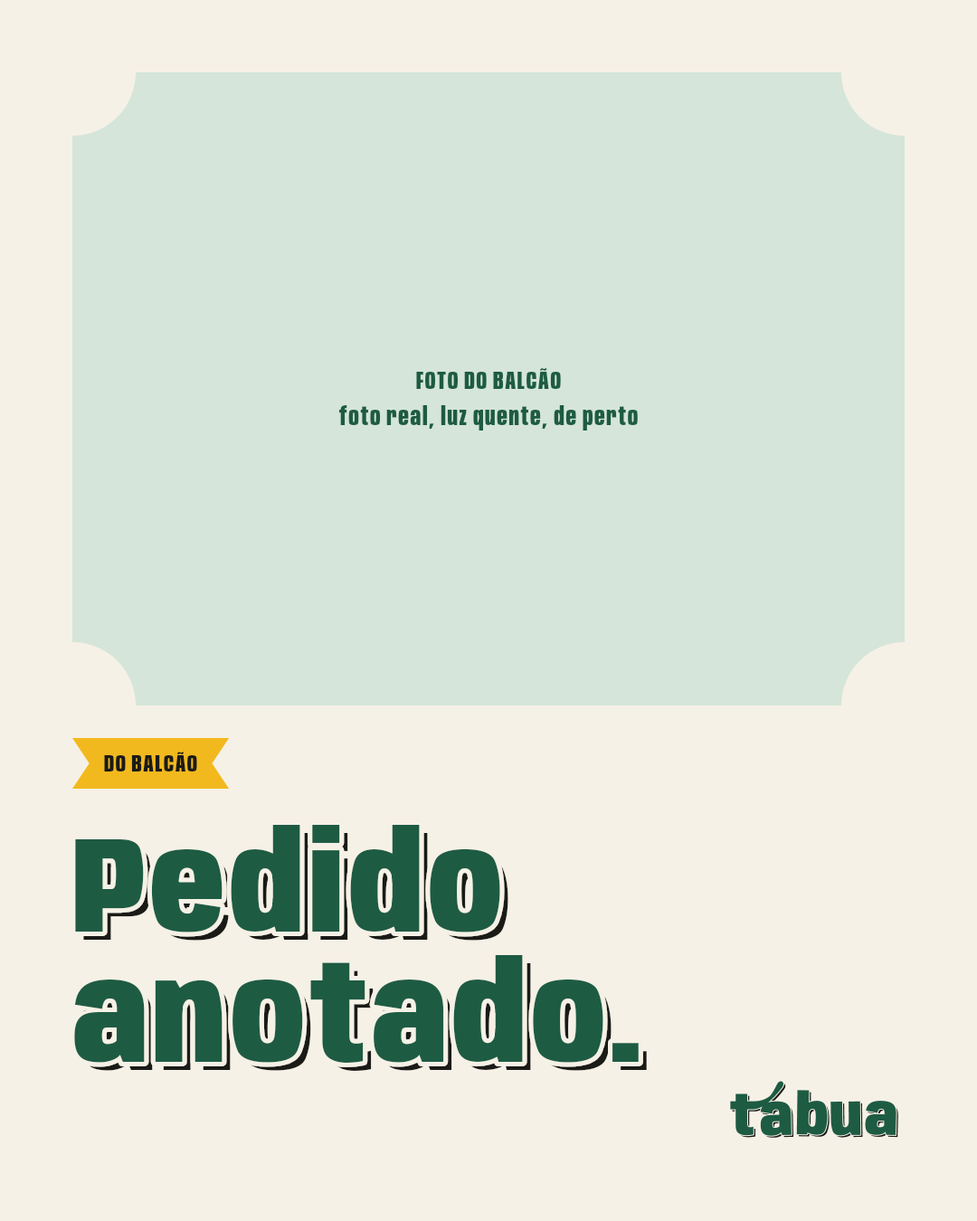
<style>
.page{position:relative;width:977px;height:1221px;background:#f6f1e6}
.page>*{position:absolute;margin:0}
.t1{font:25.3px/36.2px "Anybody-ExtraBold-W60";letter-spacing:0.06em;color:#1e5b43}
.t2{font:24.4px "Anybody-ExtraBold-W60";letter-spacing:0.06em;color:#1a1a17}
.t3{font:135.7px/130.2px "Anybody-Black-W75";letter-spacing:0.034em;color:#1e5b43}
.t4{font:135.7px/130.2px "Anybody-Black-W75";letter-spacing:0.034em}
</style>
<div class="page">
<p class="t1" style="left:338px;top:368px;width:300px;height:62px;text-align:center">FOTO DO BALCÃO<br>foto real, luz quente, de perto</p>
<p class="t2" style="left:104px;top:752px;width:93px;height:19px">DO BALCÃO</p>
<p class="t3" style="left:70px;top:820px;width:573px;height:247px">Pedido<br>anotado.</p>
<p class="t4" style="left:82px;top:833px;width:565px;height:238px">Pedido<br>anotado.</p>
</div>
